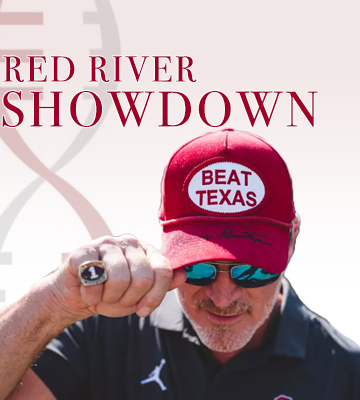
<style>
.page{position:relative;width:360px;height:400px}
.page>*{position:absolute;margin:0}
.t1{font:36px "BodoniSvtyTwoITCTT-Book";letter-spacing:0.075em;color:#a10026}
.t2{font:50px "BodoniSvtyTwoITCTT-Book";letter-spacing:0.075em;color:#a10026}
</style>
<div class="page">
<p class="t1" style="left:3px;top:56px;width:194px;height:26px">RED RIVER</p>
<p class="t2" style="left:2px;top:90px;width:316px;height:38px">SHOWDOWN</p>
</div>
